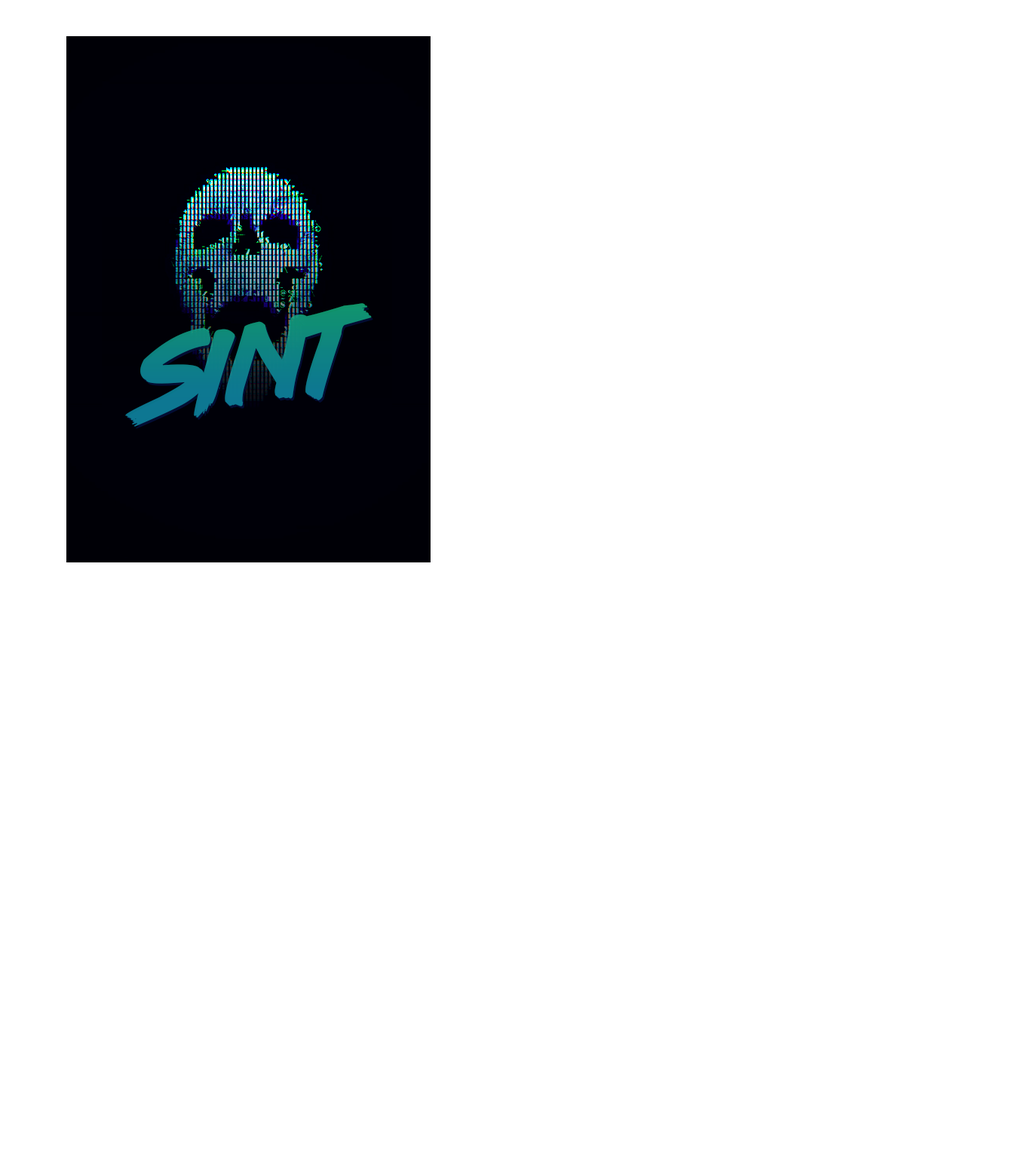
<style>
.page{position:relative;width:1030px;height:1158px;background:#ffffff}
.page>*{position:absolute;margin:0}
.t1{font:98px "lazer84";color:#0e8087}
.t2{font:98px "lazer84";color:#0d7e85}
</style>
<div class="page">
<p class="t1" style="left:125px;top:303px;width:247px;height:124px;rotate:-9deg">SINT</p>
<p class="t2" style="left:127px;top:305px;width:246px;height:124px;rotate:-9deg">SINT</p>
</div>
